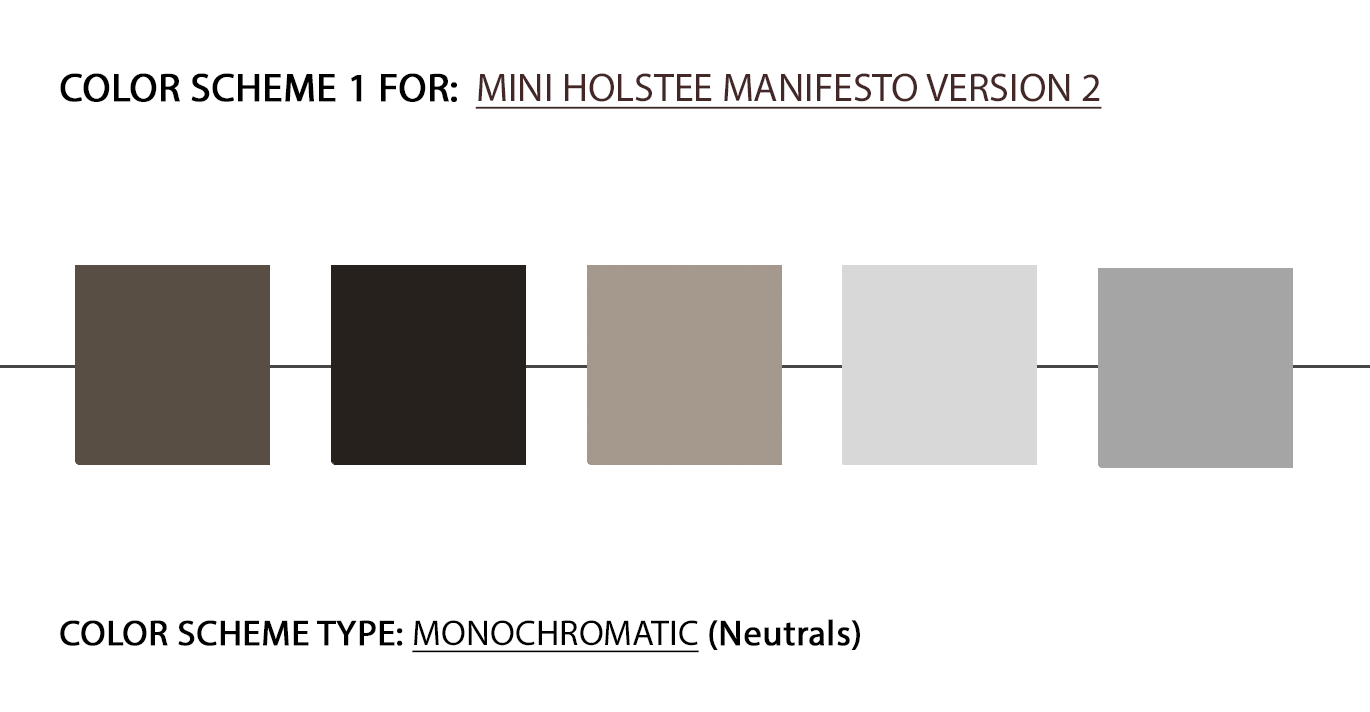
<style>
.page{position:relative;width:1370px;height:712px;background:#ffffff}
.page>*{position:absolute;margin:0}
.t1{font:40px "MyriadPro-Regular";color:#432827;text-transform:uppercase;text-decoration:underline}
.t2{font:40px "MyriadPro-Regular";color:#000000;text-transform:uppercase;font-weight:bold}
.t3{font:36px "MyriadPro-Regular";color:#000000;text-transform:uppercase;font-weight:bold}
.t4{font:36px "MyriadPro-Regular";color:#000000;text-transform:uppercase;text-decoration:underline}
.t5{font:36px "MyriadPro-Regular";color:#000000;font-weight:bold}
</style>
<div class="page">
<p class="t1" style="left:60px;top:73px;width:1042px;height:36px"><span class="t2">Color Scheme 1 for:  </span>MINI Holstee manifesto version 2</p>
<p class="t3" style="left:60px;top:619px;width:800px;height:34px">color scheme type: <span class="t4">MOnochromatic </span><span class="t5"> (Neutrals)</span></p>
</div>
